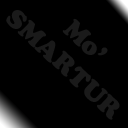
<style>
.page{position:relative;width:128px;height:128px;background:#000000}
.page>*{position:absolute;margin:0}
.t1{font:25.9px "CooperBlackStd";color:#1a1a1a}
</style>
<div class="page">
<p class="t1" style="left:6px;top:10px;width:114px;height:110px;text-align:center;rotate:43deg">Mo’<br>SMARTUR</p>
</div>
